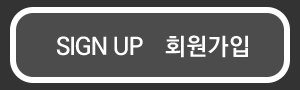
<style>
.page{position:relative;width:300px;height:90px;background:#4c4c4c}
.page>*{position:absolute;margin:0}
.t1{font:24px "KoPubWorldDotumBold";letter-spacing:-0.05em;color:#ffffff}
.t2{font:24px "KoPubWorldDotumBold";letter-spacing:0.025em;color:#ffffff}
</style>
<div class="page">
<p class="t1" style="left:56px;top:35px;width:192px;height:23px">SIGN UP<span class="t2">   회원가입</span></p>
</div>
